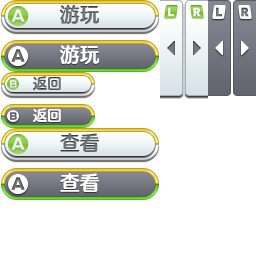
<style>
.page{position:relative;width:256px;height:256px;background:#ffffff}
.page>*{position:absolute;margin:0}
.t1{font:20px "FZFW-QingYinTiS-B--GB1-0";color:#6e737b}
.t2{font:20px "FZFW-QingYinTiS-B--GB1-0";color:#ffffff}
.t3{font:14.6px "FZFW-QingYinTiS-B--GB1-0";color:#6e737b}
.t4{font:14.6px "FZFW-QingYinTiS-B--GB1-0";color:#ffffff}
.t5{font:20px "FZFW-QingYinTiS-B--GB1-0";color:#60656c}
</style>
<div class="page">
<p class="t1" style="left:60px;top:5px;width:39px;height:19px">游玩</p>
<p class="t2" style="left:60px;top:45px;width:39px;height:20px">游玩</p>
<p class="t3" style="left:33px;top:76px;width:28px;height:15px">返回</p>
<p class="t4" style="left:33px;top:108px;width:28px;height:15px">返回</p>
<p class="t5" style="left:60px;top:133px;width:39px;height:19px">查看</p>
<p class="t2" style="left:60px;top:173px;width:39px;height:19px">查看</p>
</div>
